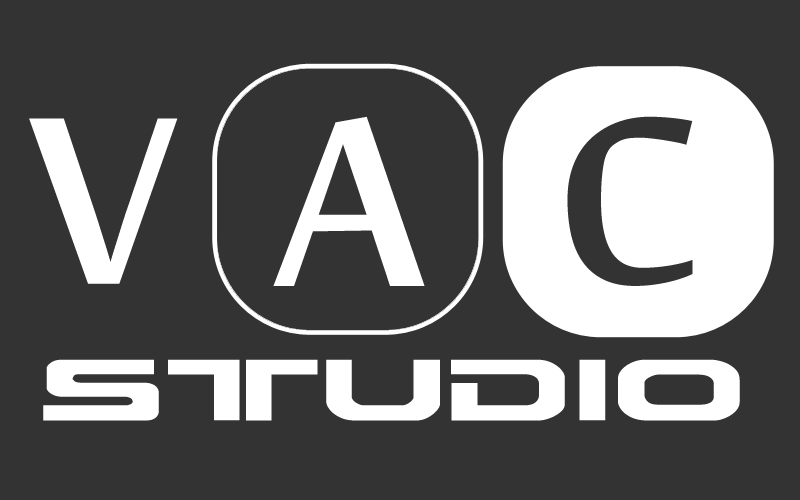
<style>
.page{position:relative;width:800px;height:500px;background:#333333}
.page>*{position:absolute;margin:0}
.t1{font:366.2px "MoolBoran";color:#ffffff}
.t2{font:86.3px "EarthNormal";color:#ffffff;scale:1.47 1}
</style>
<div class="page">
<p class="t1" style="left:29px;top:118px;width:149px;height:166px">V</p>
<p class="t1" style="left:273px;top:116px;width:152px;height:170px">A</p>
<p class="t2" style="left:43px;top:359px;width:697px;height:62px">STUDIO</p>
</div>
